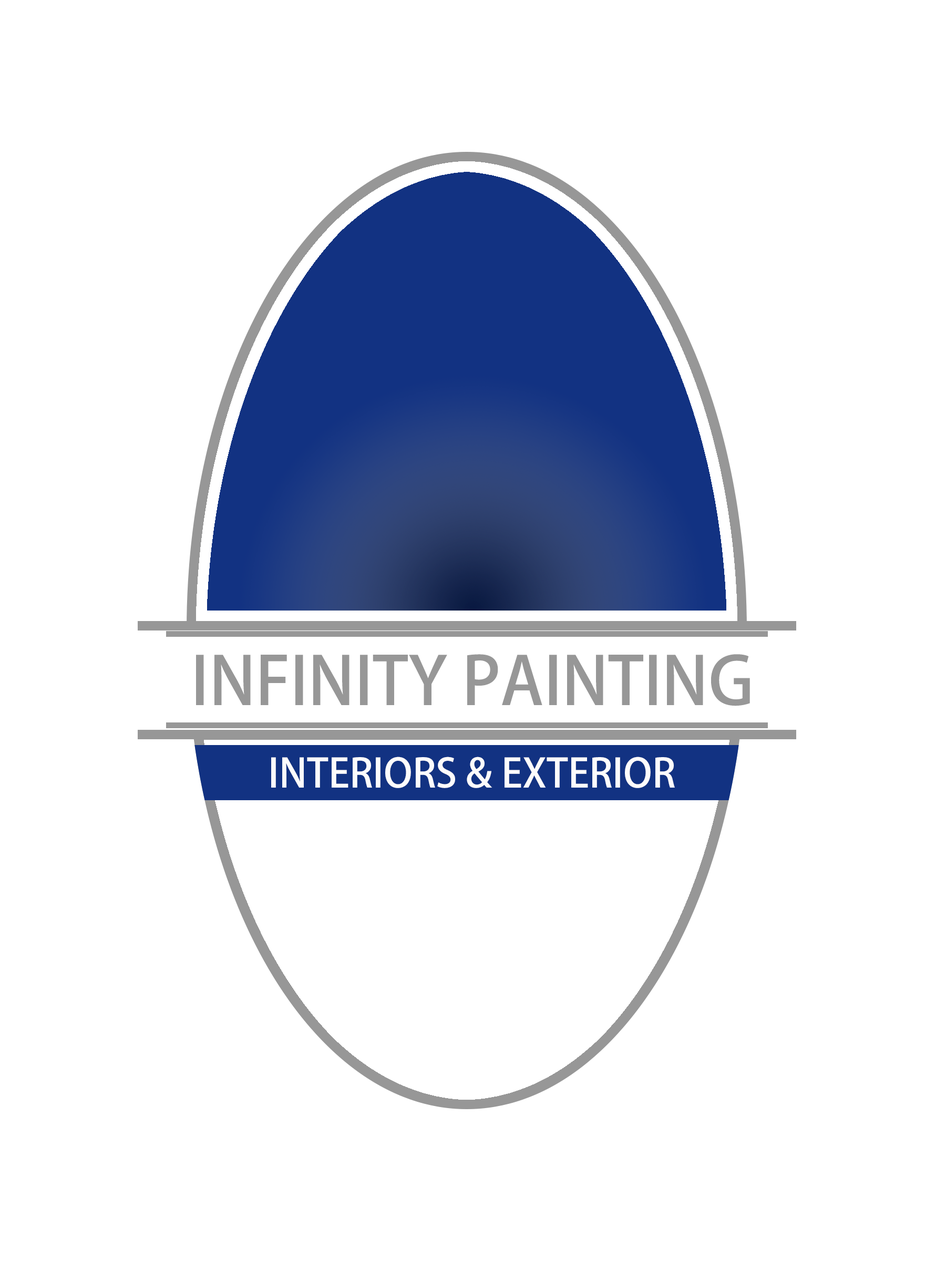
<style>
.page{position:relative;width:946px;height:1261px;background:#ffffff}
.page>*{position:absolute;margin:0}
.t1{font:65.7px "AdobeHeitiStd-Regular";color:#979797}
.t2{font:39.4px "AdobeHeitiStd-Regular";color:#fdfcfc}
</style>
<div class="page">
<p class="t1" style="left:196px;top:654px;width:554px;height:52px">INFINITY PAINTING</p>
<p class="t2" style="left:271px;top:757px;width:404px;height:31px">INTERIORS &amp; EXTERIOR</p>
</div>
